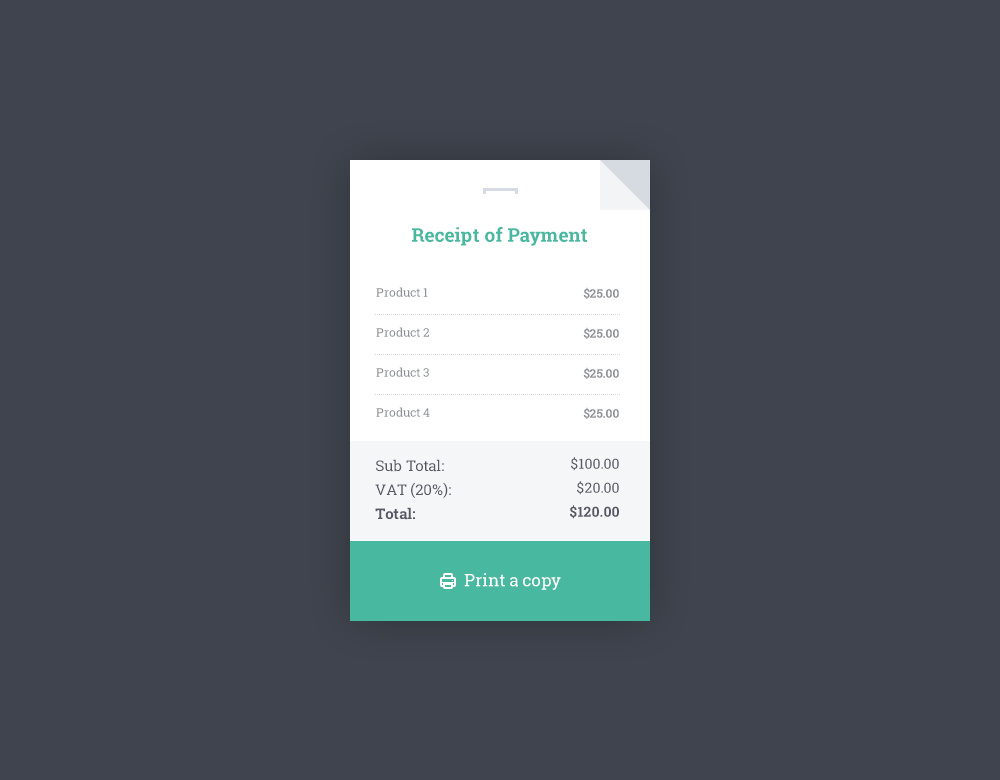
<style>
.page{position:relative;width:1000px;height:780px;background:#3f444e}
.page>*{position:absolute;margin:0}
.t1{font:19px "RobotoSlab-Bold";color:#48b9a0}
.t2{font:12px/40px "RobotoSlab-Regular";color:#8e9197}
.t3{font:12px/40px "RobotoSlab-Bold";color:#8e9197}
.t4{font:15px/24px "RobotoSlab-Regular";color:#555963}
.t5{font:15px/24px "RobotoSlab-Bold";color:#555963}
.t6{font:14px/24px "RobotoSlab-Regular";color:#555963}
.t7{font:14px/24px "RobotoSlab-Bold";color:#555963}
.t8{font:17px "RobotoSlab-Regular";color:#ffffff}
</style>
<div class="page">
<p class="t1" style="left:412px;top:227px;width:176px;height:19px">Receipt of Payment</p>
<p class="t2" style="left:376px;top:287px;width:54px;height:130px">Product 1<br>Product 2<br>Product 3<br>Product 4</p>
<p class="t3" style="left:583px;top:287px;width:36px;height:132px;text-align:right">$25.00<br>$25.00<br>$25.00<br>$25.00</p>
<p class="t4" style="left:375px;top:459px;width:76px;height:61px">Sub Total:   <br>VAT (20%):<br><span class="t5">Total:</span></p>
<p class="t6" style="left:570px;top:457px;width:49px;height:62px;text-align:right">$100.00<br>$20.00<br><span class="t7">$120.00</span></p>
<p class="t8" style="left:464px;top:573px;width:97px;height:17px">Print a copy</p>
</div>
